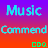
<style>
.page{position:relative;width:48px;height:48px}
.page>*{position:absolute;margin:0}
.t1{font:14.6px "MyriadConceptRoman-Regular";color:#00f3fc}
.t2{font:10.4px "MyriadConceptRoman-Regular";color:#00f3fc}
</style>
<div class="page">
<p class="t1" style="left:6px;top:5px;width:36px;height:11px">Music</p>
<p class="t2" style="left:1px;top:25px;width:46px;height:9px">Commend</p>
</div>
